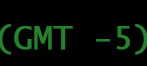
<style>
.page{position:relative;width:147px;height:66px;background:#000000}
.page>*{position:absolute;margin:0}
.t1{font:32px "LucidaSans-Typewriter";color:#24842b;font-weight:bold}
</style>
<div class="page">
<p class="t1" style="left:0px;top:24px;width:148px;height:31px">(GMT -5)</p>
</div>
